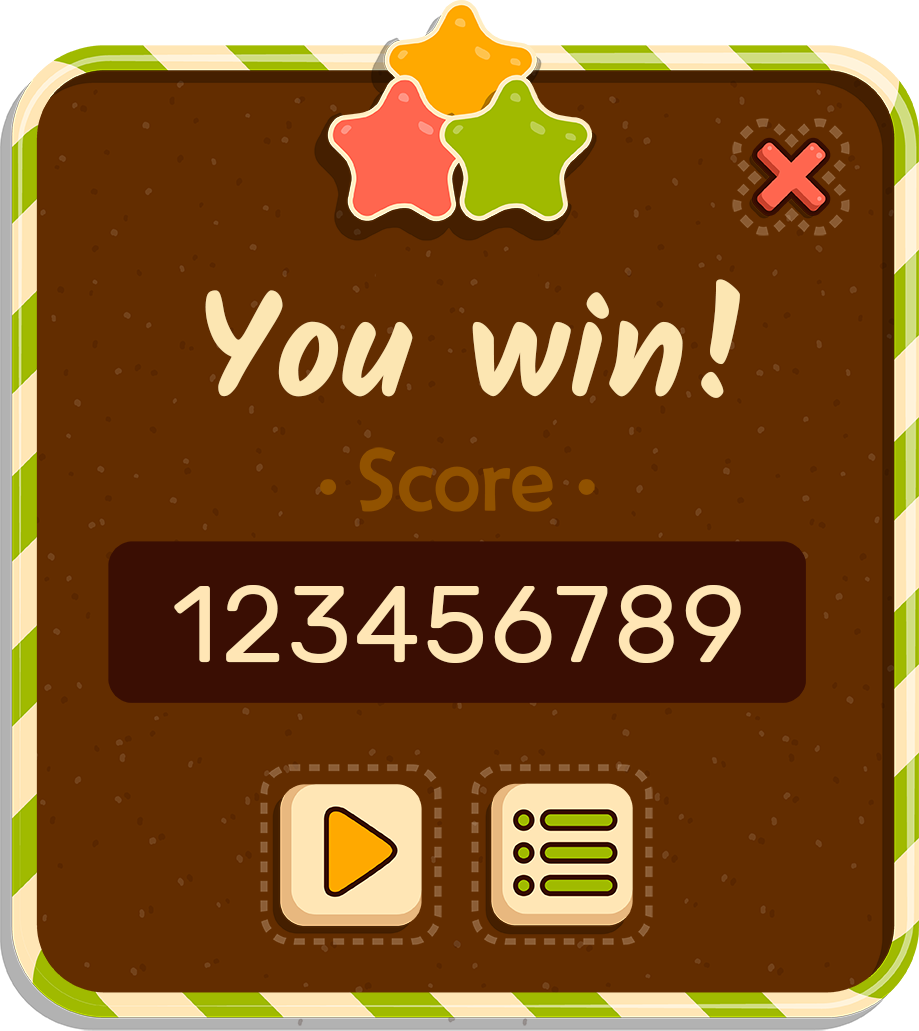
<style>
.page{position:relative;width:919px;height:1031px;background:#632d00}
.page>*{position:absolute;margin:0}
.t1{font:144.1px "Kalam-Bold";color:#fce6b2}
.t2{font:108.6px "Rubik-Regular";letter-spacing:0.025em;color:#ffe6b5}
</style>
<div class="page">
<p class="t1" style="left:205px;top:279px;width:535px;height:119px">You win!</p>
<p class="t2" style="left:174px;top:585px;width:567px;height:78px">123456789</p>
</div>
